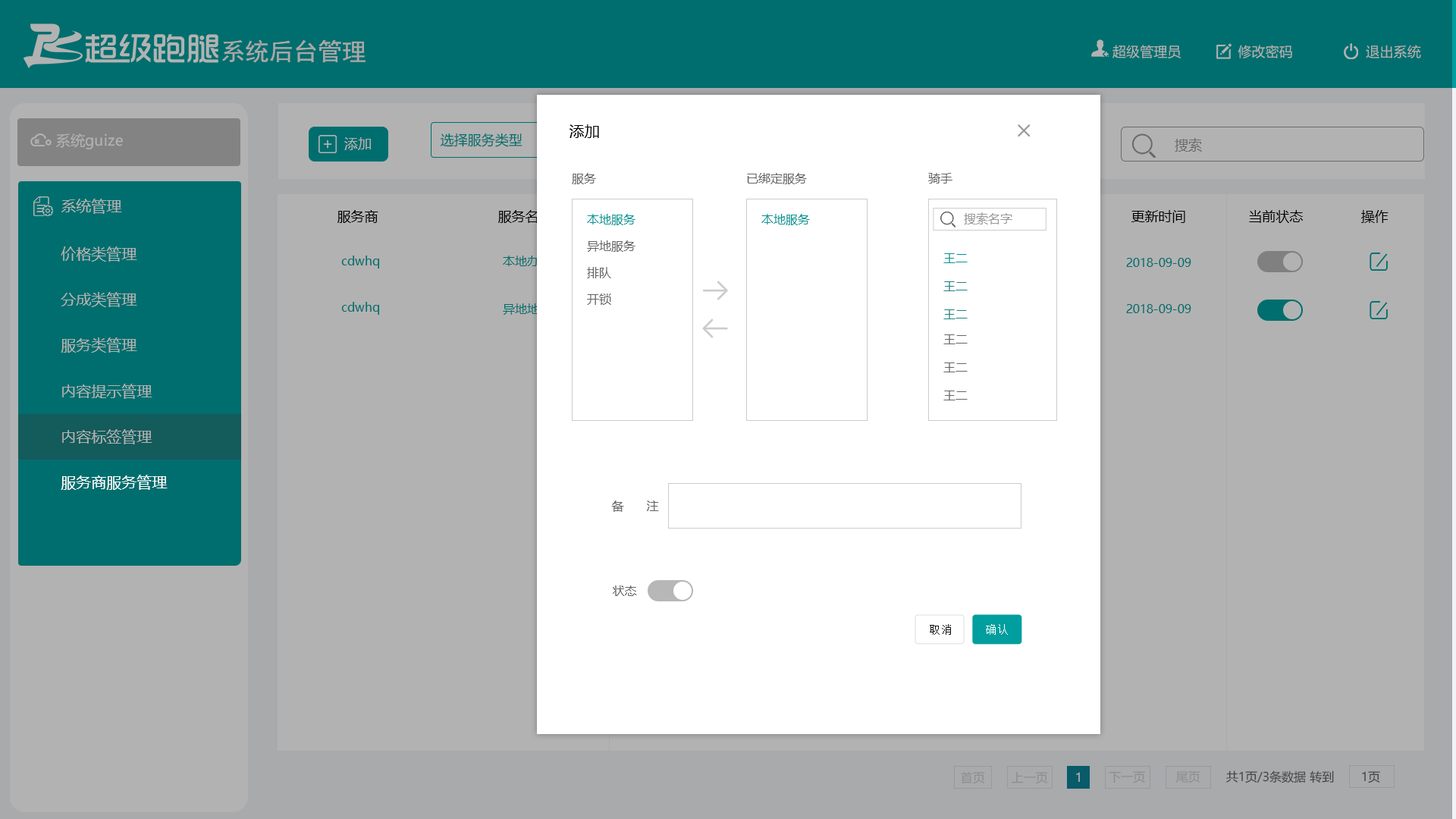
<style>
.page{position:relative;width:1456px;height:819px;background:#b2b2b2}
.page>*{position:absolute;margin:0}
.t1{font:24.4px "SimHei";color:#a8a8a8}
.t2{font:13.7px "MicrosoftYaHei";color:#b2b2b2}
.t3{font:15.2px "MicrosoftYaHei";color:#000000}
.t4{font:14.5px "MicrosoftYaHei";color:#b2b2b2}
.t5{font:13.6px "MicrosoftYaHei";color:#b2b2b2}
.t6{font:13.6px "MicrosoftYaHei";color:#006e6e}
.t7{font:13.6px "MicrosoftYaHei";color:#6b6b6b}
.t8{font:12.1px "MicrosoftYaHei";color:#666666}
.t9{font:15.2px "MicrosoftYaHei";color:#b2b2b2}
.t10{font:13.6px "MicrosoftYaHei";color:#000000}
.t11{font:12.1px "MicrosoftYaHei";color:#009595}
.t12{font:12.1px "MicrosoftYaHei";color:#999999}
.t13{font:12.1px "MicrosoftYaHei";color:#006e6e}
.t14{font:12.1px "MicrosoftYaHei"}
.t15{font:12.1px "MicrosoftYaHei";color:#1c8282}
.t16{font:15.2px "MicrosoftYaHei";color:#ffffff}
.t17{font:11.5px "SimSun";letter-spacing:0.075em;color:#111111}
.t18{font:11.5px "SimSun";letter-spacing:0.075em;color:#ffffff}
.t19{font:12.1px "MicrosoftYaHei";color:#8e8e8e}
.t20{font:12.1px "MicrosoftYaHei";color:#b2b2b2}
.t21{font:12.1px "MicrosoftYaHei";color:#464646}
</style>
<div class="page">
<p class="t1" style="left:222px;top:39px;width:144px;height:24px">系统后台管理</p>
<p class="t2" style="left:1112px;top:45px;width:309px;height:13px">超级管理员              修改密码                  退出系统</p>
<p class="t3" style="left:570px;top:124px;width:29px;height:14px">添加</p>
<p class="t4" style="left:56px;top:133px;width:67px;height:16px">系统guize</p>
<p class="t5" style="left:344px;top:137px;width:27px;height:13px">添加</p>
<p class="t6" style="left:441px;top:133px;width:81px;height:14px">选择服务类型</p>
<p class="t7" style="left:1175px;top:138px;width:27px;height:14px">搜索</p>
<p class="t8" style="left:572px;top:173px;width:24px;height:11px">服务</p>
<p class="t8" style="left:747px;top:173px;width:60px;height:11px">已绑定服务</p>
<p class="t8" style="left:928px;top:173px;width:24px;height:11px">骑手</p>
<p class="t9" style="left:61px;top:199px;width:61px;height:15px">系统管理</p>
<p class="t10" style="left:337px;top:210px;width:41px;height:13px">服务商</p>
<p class="t10" style="left:498px;top:210px;width:55px;height:13px">服务名称</p>
<p class="t11" style="left:587px;top:214px;width:48px;height:11px">本地服务</p>
<p class="t11" style="left:761px;top:214px;width:49px;height:11px">本地服务</p>
<p class="t12" style="left:964px;top:212px;width:48px;height:12px">搜索名字</p>
<p class="t10" style="left:1131px;top:210px;width:54px;height:13px">更新时间</p>
<p class="t10" style="left:1249px;top:210px;width:54px;height:13px">当前状态</p>
<p class="t10" style="left:1361px;top:210px;width:27px;height:13px">操作</p>
<p class="t8" style="left:587px;top:240px;width:48px;height:12px">异地服务</p>
<p class="t9" style="left:61px;top:246px;width:76px;height:16px">价格类管理</p>
<p class="t13" style="left:341px;top:256px;width:38px;height:12px">cdwhq</p>
<p class="t14" style="left:503px;top:256px;width:48px;height:10px">本地办事</p>
<p class="t11" style="left:943px;top:253px;width:25px;height:10px">王二</p>
<p class="t13" style="left:1126px;top:258px;width:65px;height:9px">2018-09-09</p>
<p class="t8" style="left:587px;top:267px;width:24px;height:11px">排队</p>
<p class="t15" style="left:943px;top:281px;width:25px;height:10px">王二</p>
<p class="t9" style="left:61px;top:292px;width:76px;height:15px">分成类管理</p>
<p class="t8" style="left:587px;top:293px;width:24px;height:12px">开锁</p>
<p class="t13" style="left:341px;top:302px;width:38px;height:13px">cdwhq</p>
<p class="t14" style="left:503px;top:303px;width:60px;height:12px">异地地办事</p>
<p class="t13" style="left:1126px;top:304px;width:65px;height:9px">2018-09-09</p>
<p class="t15" style="left:943px;top:309px;width:25px;height:10px">王二</p>
<p class="t9" style="left:61px;top:337px;width:76px;height:16px">服务类管理</p>
<p class="t8" style="left:943px;top:334px;width:25px;height:10px">王二</p>
<p class="t8" style="left:943px;top:362px;width:25px;height:10px">王二</p>
<p class="t9" style="left:62px;top:384px;width:90px;height:15px">内容提示管理</p>
<p class="t8" style="left:943px;top:391px;width:25px;height:9px">王二</p>
<p class="t9" style="left:62px;top:429px;width:90px;height:15px">内容标签管理</p>
<p class="t16" style="left:61px;top:475px;width:107px;height:15px">服务商服务管理</p>
<p class="t8" style="left:611px;top:500px;width:48px;height:12px">备      注</p>
<p class="t8" style="left:613px;top:585px;width:24px;height:11px">状态</p>
<p class="t17" style="left:930px;top:624px;width:21px;height:11px">取消</p>
<p class="t18" style="left:986px;top:624px;width:22px;height:11px">确认</p>
<p class="t19" style="left:961px;top:771px;width:24px;height:13px">首页</p>
<p class="t19" style="left:1012px;top:772px;width:36px;height:12px">上一页</p>
<p class="t20" style="left:1076px;top:772px;width:4px;height:10px">1</p>
<p class="t19" style="left:1109px;top:771px;width:36px;height:12px">下一页</p>
<p class="t19" style="left:1176px;top:771px;width:24px;height:12px">尾页</p>
<p class="t21" style="left:1226px;top:770px;width:108px;height:13px">共1页/3条数据 转到</p>
<p class="t21" style="left:1362px;top:771px;width:18px;height:12px">1页</p>
</div>
